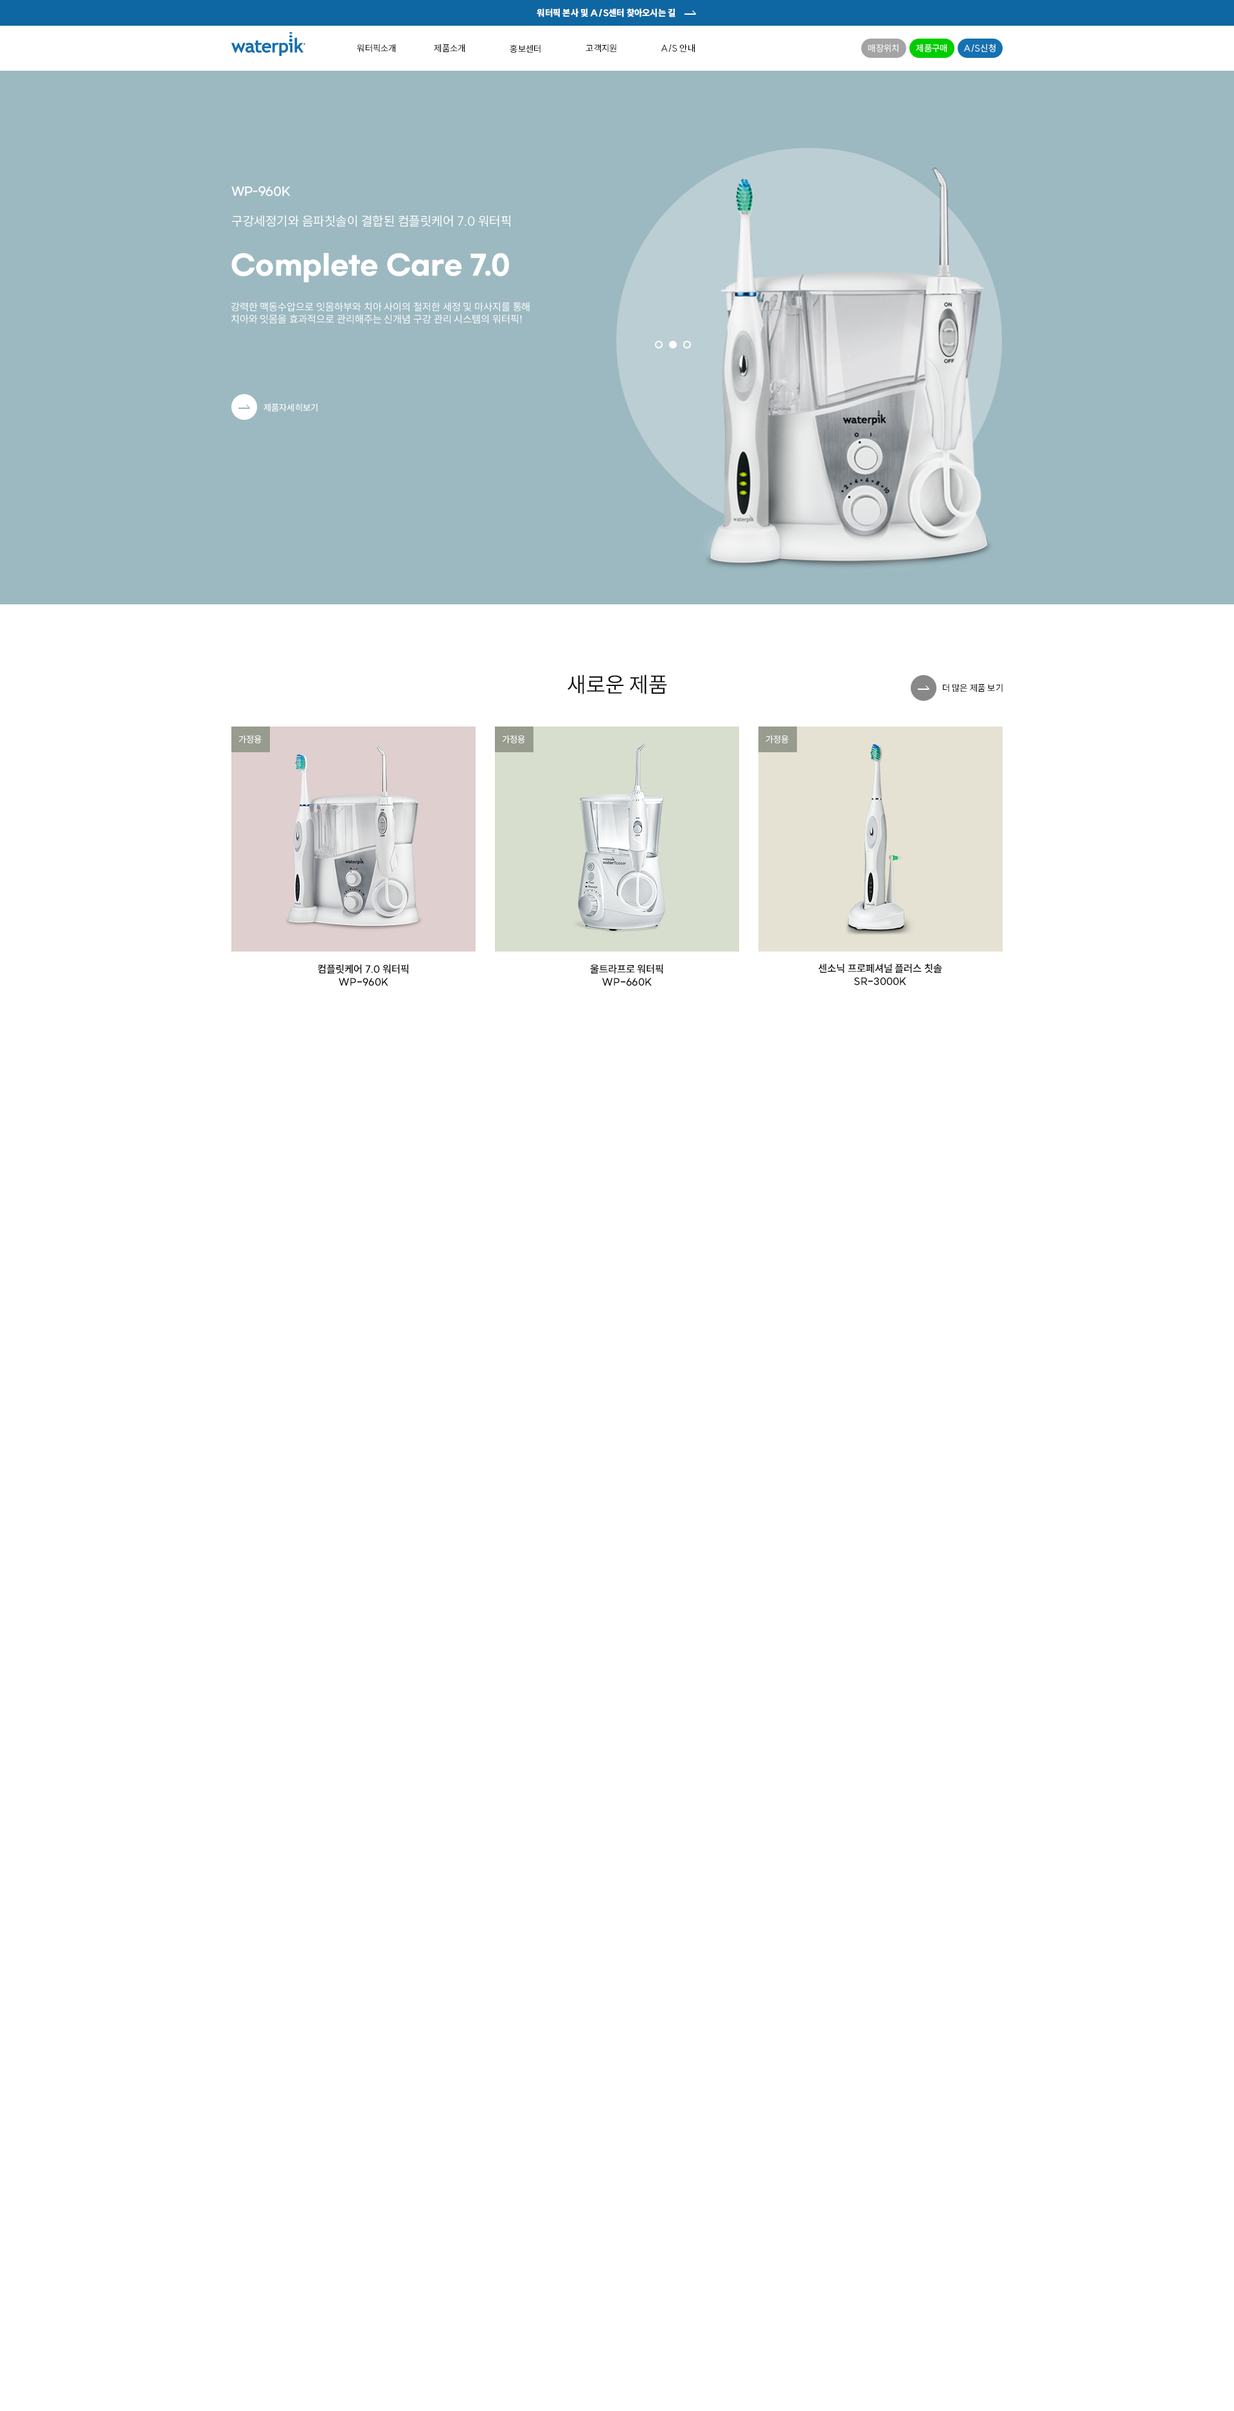
<style>
.page{position:relative;width:1234px;height:2411px;background:#ffffff}
.page>*{position:absolute;margin:0}
.t1{font:9px "SUIT-Heavy";color:#ffffff}
.t2{font:9px "SUIT-Regular";color:#000000}
.t3{font:9px "SUIT-Regular";color:#ffffff}
.t4{font:11.6px "GmarketSansMedium";color:#ffffff}
.t5{font:12.9px "SUIT-Regular";color:#ffffff}
.t6{font:27px "GmarketSansBold";color:#ffffff}
.t7{font:10.3px "SUIT-Regular";color:#ffffff}
.t8{font:21.9px "SUIT-Regular";color:#111111}
.t9{font:10.3px "SUIT-SemiBold";color:#111111}
</style>
<div class="page">
<p class="t1" style="left:537px;top:8px;width:139px;height:9px">워터픽 본사 및 A/S센터 찾아오시는 길</p>
<p class="t2" style="left:357px;top:44px;width:38px;height:9px">워터픽소개</p>
<p class="t2" style="left:434px;top:44px;width:31px;height:9px">제품소개</p>
<p class="t2" style="left:510px;top:44px;width:31px;height:9px">홍보센터</p>
<p class="t2" style="left:586px;top:44px;width:30px;height:9px">고객지원</p>
<p class="t2" style="left:662px;top:44px;width:33px;height:9px">A/S 안내</p>
<p class="t3" style="left:868px;top:44px;width:31px;height:9px">매장위치</p>
<p class="t3" style="left:916px;top:44px;width:32px;height:9px">제품구매</p>
<p class="t3" style="left:964px;top:44px;width:32px;height:9px">A/S신청</p>
<p class="t4" style="left:231px;top:186px;width:60px;height:10px">WP-960K</p>
<p class="t5" style="left:231px;top:215px;width:279px;height:12px">구강세정기와 음파칫솔이 결합된 컴플릿케어 7.0 워터픽</p>
<p class="t6" style="left:231px;top:253px;width:278px;height:29px">Complete Care 7.0</p>
<p class="t7" style="left:231px;top:302px;width:299px;height:22px">강력한 맥동수압으로 잇몸하부와 치아 사이의 철저한 세정 및 마사지를 통해<br>치아와 잇몸을 효과적으로 관리해주는 신개념 구강 관리 시스템의 워터픽!</p>
<p class="t3" style="left:264px;top:403px;width:54px;height:9px">제품자세히보기</p>
<p class="t8" style="left:568px;top:674px;width:99px;height:20px">새로운 제품</p>
<p class="t2" style="left:943px;top:683px;width:60px;height:9px">더 많은 제품 보기</p>
<p class="t3" style="left:239px;top:735px;width:23px;height:9px">가정용</p>
<p class="t3" style="left:502px;top:735px;width:23px;height:9px">가정용</p>
<p class="t3" style="left:766px;top:735px;width:23px;height:9px">가정용</p>
<p class="t9" style="left:318px;top:964px;width:91px;height:22px;text-align:center">컴플릿케어 7.0 워터픽<br>WP-960K</p>
<p class="t9" style="left:590px;top:964px;width:73px;height:22px;text-align:center">울트라프로 워터픽<br>WP-660K</p>
<p class="t9" style="left:818px;top:964px;width:124px;height:22px;text-align:center">센소닉 프로페셔널 플러스 칫솔<br>SR-3000K</p>
</div>
